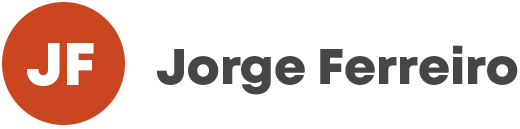
<style>
.page{position:relative;width:520px;height:129px;background:#ffffff}
.page>*{position:absolute;margin:0}
.t1{font:60px "Mont-HeavyDEMO";color:#ffffff}
.t2{font:50px "Mont-HeavyDEMO";color:#464646}
</style>
<div class="page">
<p class="t1" style="left:27px;top:43px;width:67px;height:43px">JF</p>
<p class="t2" style="left:157px;top:45px;width:361px;height:50px">Jorge Ferreiro</p>
</div>
